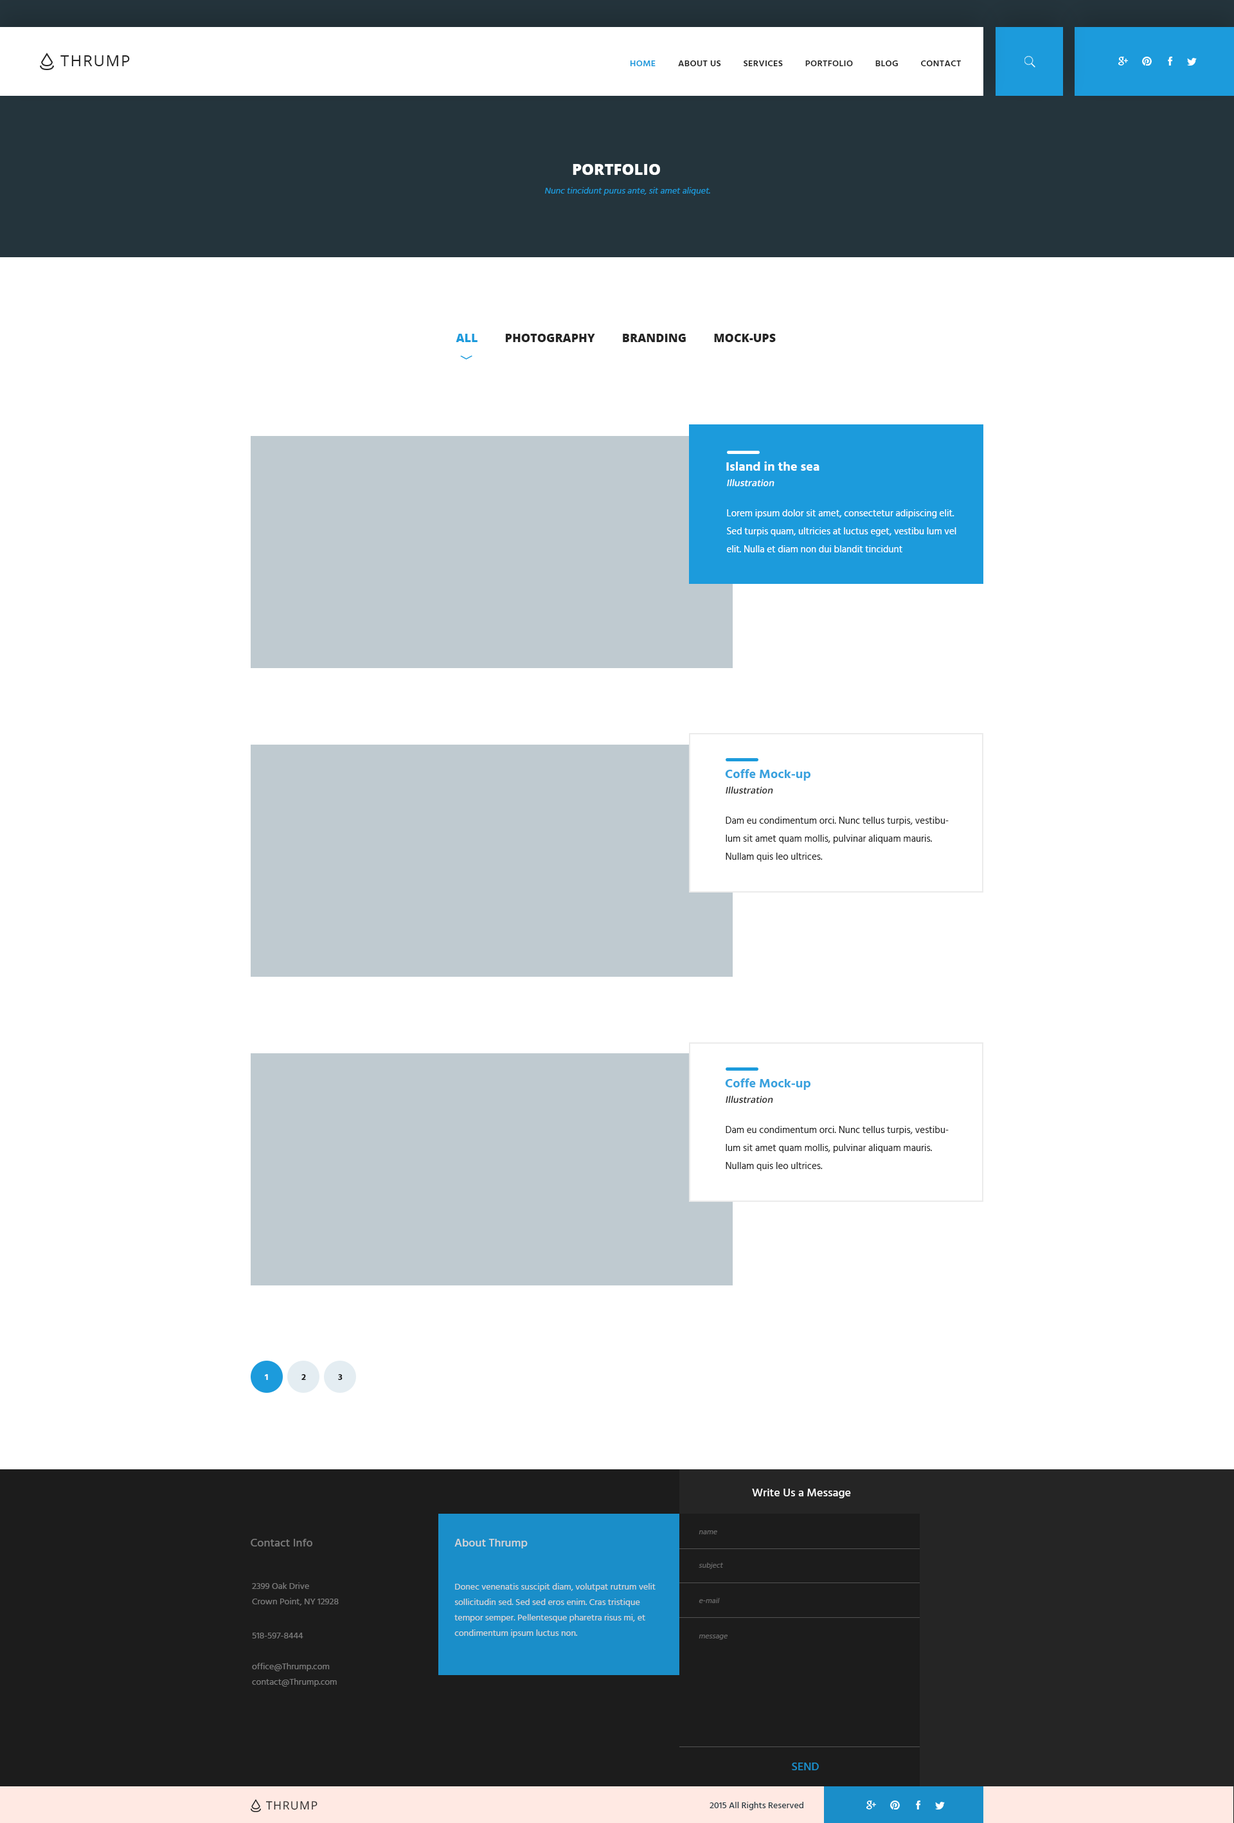
<style>
.page{position:relative;width:1234px;height:1823px;background:#ffffff}
.page>*{position:absolute;margin:0}
.t1{font:15.4px "OpenSans";letter-spacing:0.075em;color:#252525;text-transform:uppercase}
.t2{font:9px "Hind-Semibold";letter-spacing:0.025em;color:#252525;text-transform:uppercase}
.t3{font:9px "Hind-Semibold";letter-spacing:0.025em;color:#1c9bdc;text-transform:uppercase}
.t4{font:15.4px "OpenSans-Extrabold";color:#ffffff;text-transform:uppercase}
.t5{font:9px "Hind-Regular";color:#1c9bdc;font-style:italic}
.t6{font:11.6px "OpenSans-Extrabold";color:#252525;text-transform:uppercase}
.t7{font:11.6px "OpenSans-Extrabold";color:#1c9bdc;text-transform:uppercase}
.t8{font:12.9px "Hind-Bold";color:#ffffff}
.t9{font:9px "OpenSans-Semibold";color:#ffffff;font-style:italic}
.t10{font:9.6px/18px "Hind-Regular";color:#ffffff}
.t11{font:9.6px/17.4px "Hind-Regular";color:#ffffff}
.t12{font:12.9px "Hind-Bold";color:#38a2de}
.t13{font:9px "OpenSans-Semibold";color:#252525;font-style:italic}
.t14{font:9.6px/18px "Hind-Regular";color:#252525}
.t15{font:9px "Hind-Bold";color:#ffffff}
.t16{font:9px "Hind-Bold";color:#1c1c1c}
.t17{font:11.6px "Hind-Medium";color:#ffffff}
.t18{font:11.6px "Hind-Medium";color:#7b7b7b}
.t19{font:11.6px "Hind-Medium";color:#d6d6d6}
.t20{font:7.7px "Hind-Regular";color:#686868;font-style:italic}
.t21{font:9px/15.4px "Hind-Regular";color:#7b7b7b}
.t22{font:9px/15.4px "Hind-Regular";color:#d6d6d6}
.t23{font:9px "Hind-Regular";color:#7b7b7b}
.t24{font:11.6px "Hind-Medium";color:#1a8ec9}
.t25{font:11.4px "OpenSans";letter-spacing:0.075em;color:#252525;text-transform:uppercase}
.t26{font:9px "Hind-Medium";color:#273941}
</style>
<div class="page">
<p class="t1" style="left:60px;top:55px;width:70px;height:11px">Thrump</p>
<p class="t2" style="left:630px;top:60px;width:332px;height:6px"><span class="t3">Home</span>         About Us         Services         Portfolio         Blog         Contact</p>
<p class="t4" style="left:573px;top:164px;width:87px;height:11px">Portfolio</p>
<p class="t5" style="left:545px;top:187px;width:165px;height:8px">Nunc tincidunt purus ante, sit amet aliquet.</p>
<p class="t6" style="left:456px;top:334px;width:320px;height:8px"><span class="t7">All         </span>Photography         Branding         Mock-ups</p>
<p class="t8" style="left:726px;top:461px;width:94px;height:10px">Island in the sea</p>
<p class="t9" style="left:727px;top:479px;width:48px;height:8px">Illustration</p>
<p class="t10" style="left:727px;top:509px;width:230px;height:43px"><span class="t11">L</span>orem ipsum dolor sit amet, consectetur adipiscing elit. Sed turpis quam, ultricies at luctus eget, vestibu lum vel elit. Nulla et diam non dui blandit tincidunt</p>
<p class="t12" style="left:725px;top:769px;width:86px;height:11px">Coffe Mock-up</p>
<p class="t13" style="left:726px;top:786px;width:47px;height:8px">Illustration</p>
<p class="t14" style="left:726px;top:816px;width:223px;height:45px">Dam eu condimentum orci. Nunc tellus turpis, vestibulum sit amet quam mollis, pulvinar aliquam mauris. Nullam quis leo ultrices.</p>
<p class="t12" style="left:725px;top:1078px;width:86px;height:12px">Coffe Mock-up</p>
<p class="t13" style="left:726px;top:1095px;width:47px;height:8px">Illustration</p>
<p class="t14" style="left:726px;top:1126px;width:223px;height:45px">Dam eu condimentum orci. Nunc tellus turpis, vestibulum sit amet quam mollis, pulvinar aliquam mauris. Nullam quis leo ultrices.</p>
<p class="t15" style="left:265px;top:1374px;width:3px;height:6px">1</p>
<p class="t16" style="left:302px;top:1374px;width:4px;height:6px">2</p>
<p class="t16" style="left:338px;top:1374px;width:5px;height:6px">3</p>
<p class="t17" style="left:752px;top:1488px;width:99px;height:10px">Write Us a Message</p>
<p class="t18" style="left:251px;top:1538px;width:61px;height:8px">Contact Info</p>
<p class="t19" style="left:455px;top:1538px;width:73px;height:10px">About Thrump</p>
<p class="t20" style="left:699px;top:1530px;width:18px;height:4px">name</p>
<p class="t20" style="left:699px;top:1562px;width:24px;height:7px">subject</p>
<p class="t21" style="left:252px;top:1582px;width:87px;height:23px">2399 Oak Drive<br>Crown Point, NY 12928</p>
<p class="t22" style="left:455px;top:1583px;width:201px;height:54px">Donec venenatis suscipit diam, volutpat rutrum velit sollicitudin sed. Sed sed eros enim. Cras tristique tempor semper. Pellentesque pharetra risus mi, et condimentum ipsum luctus non.</p>
<p class="t20" style="left:699px;top:1598px;width:21px;height:5px">e-mail</p>
<p class="t23" style="left:252px;top:1632px;width:51px;height:6px">518-597-8444</p>
<p class="t20" style="left:699px;top:1634px;width:29px;height:5px">message</p>
<p class="t21" style="left:252px;top:1662px;width:85px;height:24px">office@Thrump.com<br>contact@Thrump.com</p>
<p class="t24" style="left:792px;top:1762px;width:27px;height:8px">SEND</p>
<p class="t25" style="left:266px;top:1801px;width:52px;height:9px">Thrump</p>
<p class="t26" style="left:710px;top:1801px;width:94px;height:9px">2015 All Rights Reserved</p>
</div>
